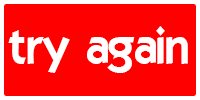
<style>
.page{position:relative;width:200px;height:100px;background:#ff0000}
.page>*{position:absolute;margin:0}
.t1{font:48px "ELEGANCE";color:#ffffff}
</style>
<div class="page">
<p class="t1" style="left:8px;top:26px;width:180px;height:47px">try again</p>
</div>
